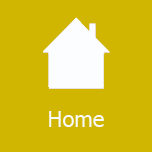
<style>
.page{position:relative;width:152px;height:152px;background:#d0b601}
.page>*{position:absolute;margin:0}
.t1{font:22px "Tahoma";color:#f8f9fc}
</style>
<div class="page">
<p class="t1" style="left:49px;top:111px;width:55px;height:16px">Home</p>
</div>
